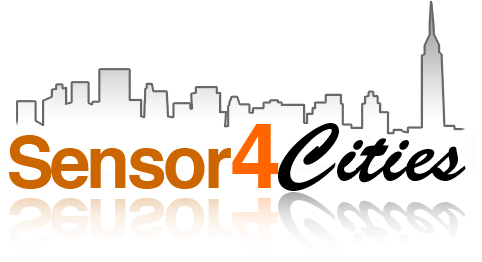
<style>
.page{position:relative;width:482px;height:262px;background:#ffffff}
.page>*{position:absolute;margin:0}
.t1{font:92px "Helvetica-Bold";letter-spacing:-0.05em;color:#ff6600}
.t2{font:82px "BrushScriptStd";color:#000000}
.t3{font:72px "Helvetica-Bold";letter-spacing:-0.05em;color:#cc6600}
</style>
<div class="page">
<p class="t1" style="left:232px;top:124px;width:47px;height:64px">4</p>
<p class="t2" style="left:278px;top:123px;width:188px;height:68px">Cities</p>
<p class="t3" style="left:9px;top:135px;width:222px;height:54px">Sensor</p>
</div>
